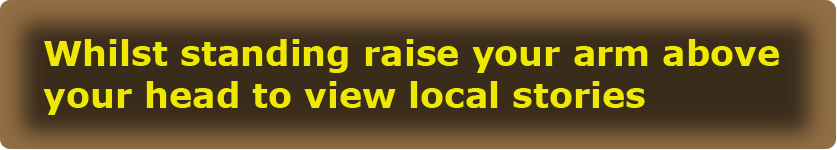
<style>
.page{position:relative;width:837px;height:150px;background:#3a2c1b}
.page>*{position:absolute;margin:0}
.t1{font:35px "Verdana-Bold";color:#efe901}
</style>
<div class="page">
<p class="t1" style="left:43px;top:39px;width:736px;height:76px">Whilst standing raise your arm above<br>your head to view local stories</p>
</div>
